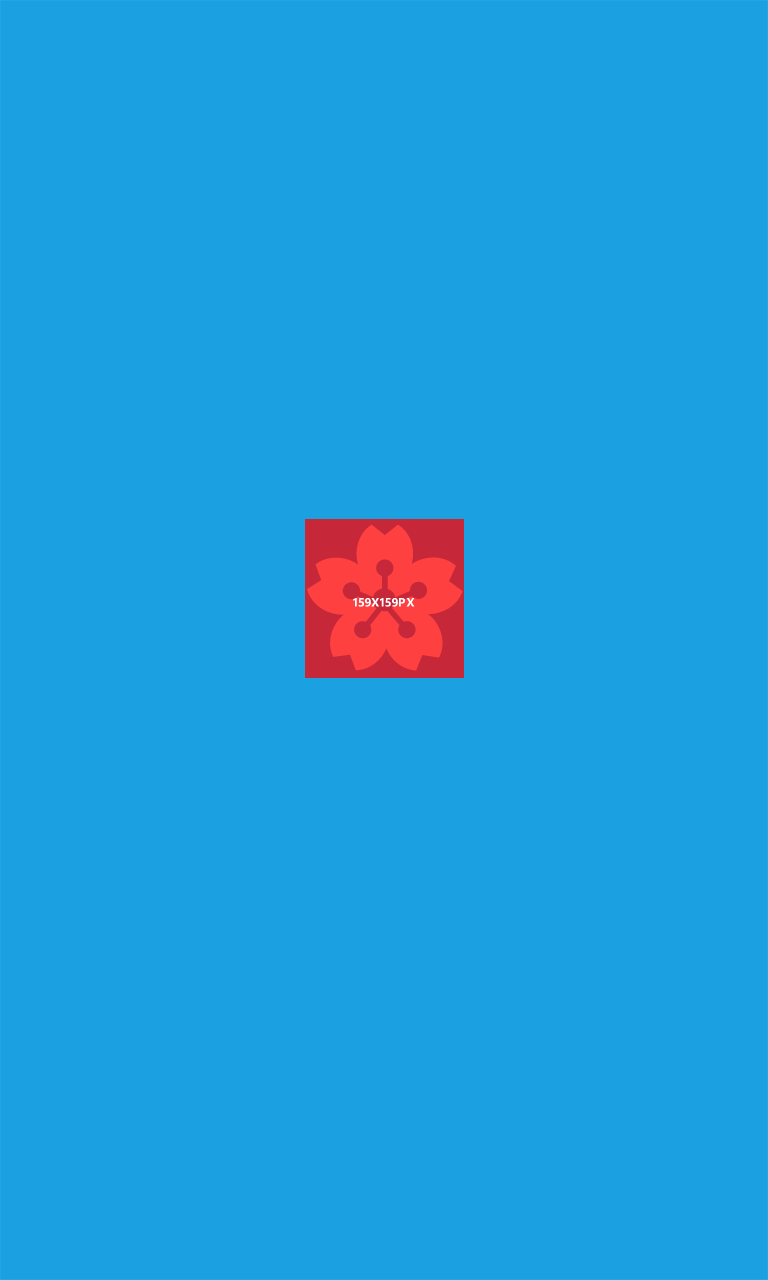
<style>
.page{position:relative;width:768px;height:1280px;background:#1ba1e2}
.page>*{position:absolute;margin:0}
.t1{font:12px "SegoeWP-Bold";letter-spacing:0.025em;color:#ffffff;text-transform:uppercase}
</style>
<div class="page">
<p class="t1" style="left:353px;top:598px;width:62px;height:9px">159x159px</p>
</div>
